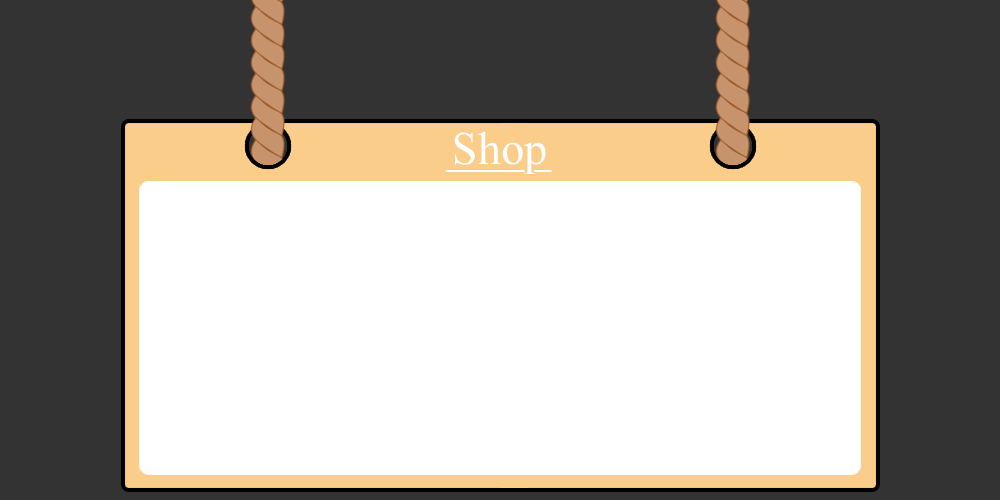
<style>
.page{position:relative;width:1000px;height:500px;background:#ffffff}
.page>*{position:absolute;margin:0}
.t1{font:46.2px "TimesNewRomanPSMT";color:#ffffff}
</style>
<div class="page">
<p class="t1" style="left:454px;top:131px;width:92px;height:43px">Shop</p>
</div>
